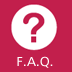
<style>
.page{position:relative;width:72px;height:72px;background:#c21f4c}
.page>*{position:absolute;margin:0}
.t1{font:13px "Frutiger-Roman";color:#ffffff}
</style>
<div class="page">
<p class="t1" style="left:17px;top:56px;width:36px;height:12px">F.A.Q.</p>
</div>
